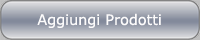
<style>
.page{position:relative;width:200px;height:40px}
.page>*{position:absolute;margin:0}
.t1{font:14.4px "Verdana";color:#fcfbfb}
.t2{font:11.2px "BrushScriptMT";color:#595959}
</style>
<div class="page">
<p class="t1" style="left:37px;top:13px;width:124px;height:15px"><span class="t2"><br></span>Aggiungi Prodotti</p>
</div>
